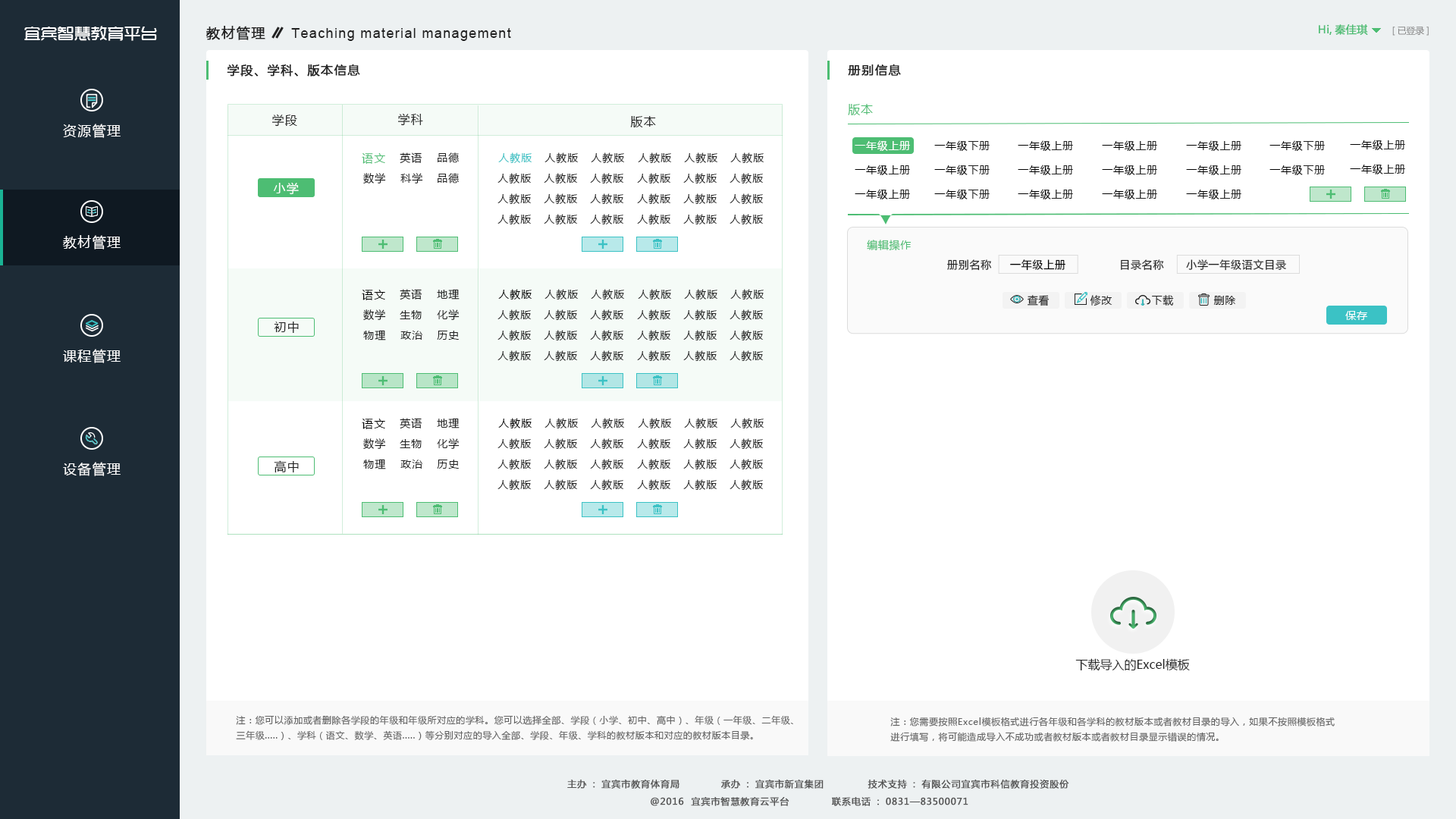
<style>
.page{position:relative;width:1456px;height:819px;background:#ffffff}
.page>*{position:absolute;margin:0}
.t1{font:16.7px "TRENDS";color:#ffffff}
.t2{font:13.6px "MicrosoftYaHei";letter-spacing:0.075em;color:#222222;font-weight:bold}
.t3{font:13.6px "ArialMT";letter-spacing:0.075em;color:#222222}
.t4{font:10.6px "MicrosoftYaHei";color:#4dbd73;font-weight:bold}
.t5{font:9.1px "MicrosoftYaHei";letter-spacing:-0.01em;color:#868686}
.t6{font:12.1px "MicrosoftYaHei";letter-spacing:0.075em;color:#222222;font-weight:bold}
.t7{font:12.1px "MicrosoftYaHei";letter-spacing:0.075em;color:#222222}
.t8{font:12.1px "MicrosoftYaHei";letter-spacing:0.05em;color:#4dbd73}
.t9{font:13.6px "MicrosoftYaHei";letter-spacing:0.075em;color:#ffffff}
.t10{font:10.6px "MicrosoftYaHei";letter-spacing:0.05em;color:#ffffff}
.t11{font:10.6px "MicrosoftYaHei";letter-spacing:0.05em;color:#000000}
.t12{font:10.6px "MicrosoftYaHei";letter-spacing:0.05em;color:#222222}
.t13{font:11.4px "MicrosoftYaHei";letter-spacing:0.075em;color:#4dbd73}
.t14{font:10.6px "MicrosoftYaHei";letter-spacing:0.075em;color:#222222}
.t15{font:10.6px "MicrosoftYaHei";letter-spacing:0.075em;color:#3bc2c5}
.t16{font:12.1px "MicrosoftYaHei";letter-spacing:0.075em;color:#ffffff}
.t17{font:10.6px "MicrosoftYaHei";letter-spacing:0.05em;color:#4dbd73}
.t18{font:11.4px "MicrosoftYaHei";letter-spacing:0.075em;color:#000000}
.t19{font:10.6px "MicrosoftYaHei";letter-spacing:0.075em;color:#000000}
.t20{font:12.1px "MicrosoftYaHei";color:#222222}
.t21{font:9.1px/15.2px "MicrosoftYaHei";letter-spacing:0.05em;color:#646464}
.t22{font:9.1px "MicrosoftYaHei";letter-spacing:0.05em;color:#545454;font-weight:bold}
</style>
<div class="page">
<p class="t1" style="left:24px;top:26px;width:133px;height:15px">宜宾智慧教育平台</p>
<p class="t2" style="left:206px;top:26px;width:59px;height:14px">教材管理</p>
<p class="t3" style="left:291px;top:28px;width:220px;height:13px">Teaching material management</p>
<p class="t4" style="left:1319px;top:24px;width:49px;height:11px">Hi,秦佳琪</p>
<p class="t5" style="left:1392px;top:26px;width:37px;height:10px">[已登录]</p>
<p class="t6" style="left:227px;top:64px;width:133px;height:13px">学段、学科、版本信息</p>
<p class="t6" style="left:848px;top:64px;width:53px;height:12px">册别信息</p>
<p class="t7" style="left:272px;top:114px;width:25px;height:13px">学段</p>
<p class="t7" style="left:398px;top:113px;width:25px;height:13px">学科</p>
<p class="t8" style="left:848px;top:104px;width:25px;height:11px">版本</p>
<p class="t9" style="left:63px;top:124px;width:58px;height:14px">资源管理</p>
<p class="t7" style="left:630px;top:116px;width:26px;height:11px">版本</p>
<p class="t10" style="left:855px;top:140px;width:55px;height:11px">一年级上册</p>
<p class="t11" style="left:934px;top:140px;width:56px;height:11px">一年级<span class="t12">下册</span></p>
<p class="t11" style="left:1018px;top:140px;width:55px;height:11px">一年级<span class="t12">上册</span></p>
<p class="t11" style="left:1102px;top:140px;width:55px;height:11px">一年级<span class="t12">上册</span></p>
<p class="t11" style="left:1186px;top:140px;width:55px;height:11px">一年级<span class="t12">上册</span></p>
<p class="t11" style="left:1269px;top:140px;width:56px;height:11px">一年级<span class="t12">下册</span></p>
<p class="t11" style="left:1350px;top:140px;width:55px;height:10px">一年级<span class="t12">上册</span></p>
<p class="t13" style="left:362px;top:152px;width:23px;height:12px">语文</p>
<p class="t14" style="left:400px;top:152px;width:22px;height:12px">英语</p>
<p class="t14" style="left:438px;top:152px;width:21px;height:11px">品德</p>
<p class="t15" style="left:498px;top:152px;width:34px;height:11px">人教版</p>
<p class="t14" style="left:544px;top:152px;width:35px;height:11px">人教版</p>
<p class="t14" style="left:591px;top:152px;width:34px;height:11px">人教版</p>
<p class="t14" style="left:638px;top:152px;width:34px;height:11px">人教版</p>
<p class="t14" style="left:684px;top:152px;width:34px;height:11px">人教版</p>
<p class="t14" style="left:730px;top:152px;width:34px;height:11px">人教版</p>
<p class="t14" style="left:363px;top:173px;width:23px;height:11px">数学</p>
<p class="t14" style="left:400px;top:173px;width:23px;height:11px">科学</p>
<p class="t14" style="left:438px;top:173px;width:21px;height:11px">品德</p>
<p class="t14" style="left:497px;top:173px;width:35px;height:11px">人教版</p>
<p class="t14" style="left:544px;top:173px;width:34px;height:11px">人教版</p>
<p class="t14" style="left:590px;top:173px;width:34px;height:11px">人教版</p>
<p class="t14" style="left:637px;top:173px;width:34px;height:11px">人教版</p>
<p class="t14" style="left:683px;top:173px;width:34px;height:11px">人教版</p>
<p class="t14" style="left:730px;top:173px;width:34px;height:11px">人教版</p>
<p class="t11" style="left:855px;top:165px;width:55px;height:10px">一年级<span class="t12">上册</span></p>
<p class="t11" style="left:934px;top:165px;width:56px;height:10px">一年级<span class="t12">下册</span></p>
<p class="t11" style="left:1018px;top:165px;width:55px;height:10px">一年级<span class="t12">上册</span></p>
<p class="t11" style="left:1102px;top:165px;width:55px;height:10px">一年级<span class="t12">上册</span></p>
<p class="t11" style="left:1186px;top:165px;width:55px;height:10px">一年级<span class="t12">上册</span></p>
<p class="t11" style="left:1269px;top:165px;width:56px;height:10px">一年级<span class="t12">下册</span></p>
<p class="t11" style="left:1350px;top:164px;width:55px;height:10px">一年级<span class="t12">上册</span></p>
<p class="t16" style="left:274px;top:182px;width:25px;height:13px">小学</p>
<p class="t14" style="left:497px;top:193px;width:35px;height:11px">人教版</p>
<p class="t14" style="left:544px;top:193px;width:34px;height:11px">人教版</p>
<p class="t14" style="left:590px;top:193px;width:34px;height:11px">人教版</p>
<p class="t14" style="left:637px;top:193px;width:34px;height:11px">人教版</p>
<p class="t14" style="left:683px;top:193px;width:34px;height:11px">人教版</p>
<p class="t14" style="left:730px;top:193px;width:34px;height:11px">人教版</p>
<p class="t11" style="left:855px;top:189px;width:55px;height:10px">一年级<span class="t12">上册</span></p>
<p class="t11" style="left:934px;top:189px;width:56px;height:10px">一年级<span class="t12">下册</span></p>
<p class="t11" style="left:1018px;top:189px;width:55px;height:10px">一年级<span class="t12">上册</span></p>
<p class="t11" style="left:1102px;top:189px;width:55px;height:10px">一年级<span class="t12">上册</span></p>
<p class="t11" style="left:1186px;top:189px;width:55px;height:10px">一年级<span class="t12">上册</span></p>
<p class="t14" style="left:497px;top:214px;width:35px;height:10px">人教版</p>
<p class="t14" style="left:544px;top:214px;width:34px;height:10px">人教版</p>
<p class="t14" style="left:590px;top:214px;width:34px;height:10px">人教版</p>
<p class="t14" style="left:637px;top:214px;width:34px;height:10px">人教版</p>
<p class="t14" style="left:683px;top:214px;width:34px;height:10px">人教版</p>
<p class="t14" style="left:730px;top:214px;width:34px;height:10px">人教版</p>
<p class="t9" style="left:63px;top:235px;width:58px;height:14px">教材管理</p>
<p class="t17" style="left:867px;top:240px;width:45px;height:11px">编辑操作</p>
<p class="t11" style="left:947px;top:259px;width:118px;height:12px"><span class="t12">册别名称     </span>一年级上册</p>
<p class="t12" style="left:1121px;top:259px;width:165px;height:12px">目录名称      小学一年级语文目录</p>
<p class="t18" style="left:362px;top:289px;width:23px;height:11px">语文</p>
<p class="t14" style="left:400px;top:289px;width:22px;height:11px">英语</p>
<p class="t14" style="left:437px;top:289px;width:23px;height:11px">地理</p>
<p class="t19" style="left:498px;top:289px;width:34px;height:11px">人教版</p>
<p class="t14" style="left:544px;top:289px;width:35px;height:11px">人教版</p>
<p class="t14" style="left:591px;top:289px;width:34px;height:11px">人教版</p>
<p class="t14" style="left:638px;top:289px;width:34px;height:11px">人教版</p>
<p class="t14" style="left:684px;top:289px;width:34px;height:11px">人教版</p>
<p class="t14" style="left:730px;top:289px;width:34px;height:11px">人教版</p>
<p class="t12" style="left:1028px;top:295px;width:22px;height:11px">查看</p>
<p class="t12" style="left:1090px;top:295px;width:22px;height:11px">修改</p>
<p class="t12" style="left:1152px;top:295px;width:22px;height:11px">下载</p>
<p class="t12" style="left:1213px;top:296px;width:23px;height:9px">删除</p>
<p class="t14" style="left:363px;top:309px;width:23px;height:11px">数学</p>
<p class="t14" style="left:400px;top:310px;width:22px;height:9px">生物</p>
<p class="t14" style="left:437px;top:309px;width:23px;height:11px">化学</p>
<p class="t14" style="left:497px;top:309px;width:35px;height:11px">人教版</p>
<p class="t14" style="left:544px;top:309px;width:34px;height:11px">人教版</p>
<p class="t14" style="left:590px;top:309px;width:34px;height:11px">人教版</p>
<p class="t14" style="left:637px;top:309px;width:34px;height:11px">人教版</p>
<p class="t14" style="left:683px;top:309px;width:34px;height:11px">人教版</p>
<p class="t14" style="left:730px;top:309px;width:34px;height:11px">人教版</p>
<p class="t10" style="left:1345px;top:311px;width:22px;height:9px">保存</p>
<p class="t7" style="left:274px;top:322px;width:25px;height:11px">初中</p>
<p class="t14" style="left:363px;top:330px;width:23px;height:10px">物理</p>
<p class="t14" style="left:497px;top:330px;width:35px;height:10px">人教版</p>
<p class="t14" style="left:544px;top:330px;width:34px;height:10px">人教版</p>
<p class="t14" style="left:590px;top:330px;width:34px;height:10px">人教版</p>
<p class="t14" style="left:637px;top:330px;width:34px;height:10px">人教版</p>
<p class="t14" style="left:683px;top:330px;width:34px;height:10px">人教版</p>
<p class="t14" style="left:730px;top:330px;width:34px;height:10px">人教版</p>
<p class="t14" style="left:400px;top:331px;width:22px;height:9px">政治</p>
<p class="t14" style="left:437px;top:331px;width:22px;height:9px">历史</p>
<p class="t9" style="left:63px;top:349px;width:58px;height:14px">课程管理</p>
<p class="t14" style="left:497px;top:350px;width:35px;height:11px">人教版</p>
<p class="t14" style="left:544px;top:350px;width:34px;height:11px">人教版</p>
<p class="t14" style="left:590px;top:350px;width:34px;height:11px">人教版</p>
<p class="t14" style="left:637px;top:350px;width:34px;height:11px">人教版</p>
<p class="t14" style="left:683px;top:350px;width:34px;height:11px">人教版</p>
<p class="t14" style="left:730px;top:350px;width:34px;height:11px">人教版</p>
<p class="t18" style="left:362px;top:418px;width:23px;height:11px">语文</p>
<p class="t14" style="left:400px;top:418px;width:22px;height:11px">英语</p>
<p class="t14" style="left:437px;top:418px;width:23px;height:10px">地理</p>
<p class="t19" style="left:498px;top:418px;width:34px;height:10px">人教版</p>
<p class="t14" style="left:544px;top:418px;width:35px;height:10px">人教版</p>
<p class="t14" style="left:591px;top:418px;width:34px;height:10px">人教版</p>
<p class="t14" style="left:638px;top:418px;width:34px;height:10px">人教版</p>
<p class="t14" style="left:684px;top:418px;width:34px;height:10px">人教版</p>
<p class="t14" style="left:730px;top:418px;width:34px;height:10px">人教版</p>
<p class="t14" style="left:363px;top:438px;width:23px;height:11px">数学</p>
<p class="t14" style="left:400px;top:439px;width:22px;height:9px">生物</p>
<p class="t14" style="left:437px;top:438px;width:23px;height:11px">化学</p>
<p class="t14" style="left:497px;top:438px;width:35px;height:11px">人教版</p>
<p class="t14" style="left:544px;top:438px;width:34px;height:11px">人教版</p>
<p class="t14" style="left:590px;top:438px;width:34px;height:11px">人教版</p>
<p class="t14" style="left:637px;top:438px;width:34px;height:11px">人教版</p>
<p class="t14" style="left:683px;top:438px;width:34px;height:11px">人教版</p>
<p class="t14" style="left:730px;top:438px;width:34px;height:11px">人教版</p>
<p class="t9" style="left:63px;top:462px;width:58px;height:14px">设备管理</p>
<p class="t7" style="left:274px;top:460px;width:25px;height:13px">高中</p>
<p class="t14" style="left:363px;top:459px;width:23px;height:10px">物理</p>
<p class="t14" style="left:400px;top:460px;width:22px;height:9px">政治</p>
<p class="t14" style="left:437px;top:460px;width:22px;height:9px">历史</p>
<p class="t14" style="left:497px;top:459px;width:35px;height:10px">人教版</p>
<p class="t14" style="left:544px;top:459px;width:34px;height:10px">人教版</p>
<p class="t14" style="left:590px;top:459px;width:34px;height:10px">人教版</p>
<p class="t14" style="left:637px;top:459px;width:34px;height:10px">人教版</p>
<p class="t14" style="left:683px;top:459px;width:34px;height:10px">人教版</p>
<p class="t14" style="left:730px;top:459px;width:34px;height:10px">人教版</p>
<p class="t14" style="left:497px;top:479px;width:35px;height:11px">人教版</p>
<p class="t14" style="left:544px;top:479px;width:34px;height:11px">人教版</p>
<p class="t14" style="left:590px;top:479px;width:34px;height:11px">人教版</p>
<p class="t14" style="left:637px;top:479px;width:34px;height:11px">人教版</p>
<p class="t14" style="left:683px;top:479px;width:34px;height:11px">人教版</p>
<p class="t14" style="left:730px;top:479px;width:34px;height:11px">人教版</p>
<p class="t20" style="left:1075px;top:658px;width:115px;height:13px">下载导入的Excel模板</p>
<p class="t21" style="left:236px;top:715px;width:557px;height:25px">注：您可以添加或者删除各学段的年级和年级所对应的学科。您可以选择全部、学段（小学、初中、高中）、年级（一年级、二年级、<br>三年级.....）、学科（语文、数学、英语.....）等分别对应的导入全部、学段、年级、学科的教材版本和对应的教材版本目录。</p>
<p class="t21" style="left:890px;top:717px;width:445px;height:25px">注：您需要按照Excel模板格式进行各年级和各学科的教材版本或者教材目录的导入，如果不按照模板格式<br>进行填写，将可能造成导入不成功或者教材版本或者教材目录显示错误的情况。</p>
<p class="t22" style="left:567px;top:780px;width:112px;height:9px">主办：宜宾市教育体育局</p>
<p class="t22" style="left:721px;top:780px;width:103px;height:9px">承办：宜宾市新宜集团</p>
<p class="t22" style="left:868px;top:780px;width:201px;height:9px">技术支持：有限公司宜宾市科信教育投资股份</p>
<p class="t22" style="left:651px;top:797px;width:138px;height:9px">@2016  宜宾市智慧教育云平台</p>
<p class="t22" style="left:832px;top:797px;width:136px;height:9px">联系电话：0831—83500071</p>
</div>
